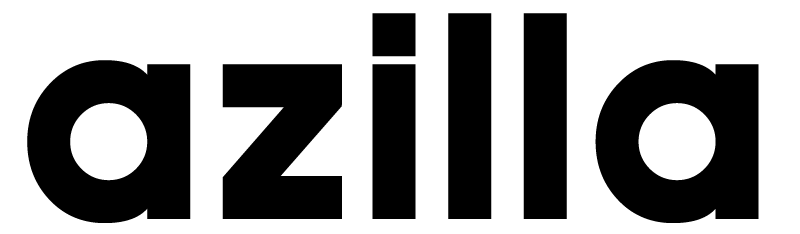
<style>
.page{position:relative;width:800px;height:234px;background:#ffffff}
.page>*{position:absolute;margin:0}
.t1{font:325.4px "QuicksansAccurateICGFill";letter-spacing:0.02em;color:#000000}
</style>
<div class="page">
<p class="t1" style="left:27px;top:13px;width:732px;height:210px">azilla</p>
</div>
